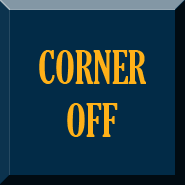
<style>
.page{position:relative;width:185px;height:185px;background:#022b47}
.page>*{position:absolute;margin:0}
.t1{font:43.8px "GloucesterMT-ExtraCondensed";color:#ffb118}
</style>
<div class="page">
<p class="t1" style="left:39px;top:50px;width:107px;height:87px;text-align:center">CORNER<br>OFF</p>
</div>
